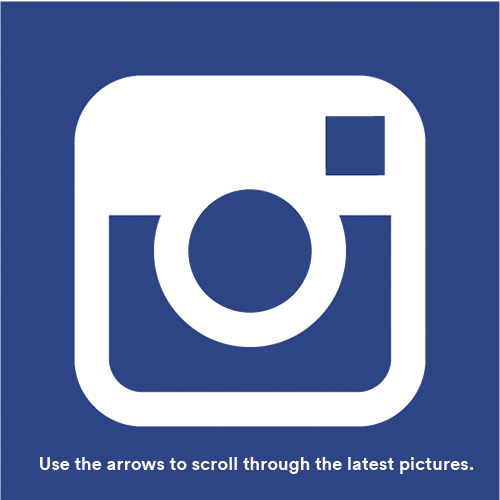
<style>
.page{position:relative;width:500px;height:500px;background:#ffffff}
.page>*{position:absolute;margin:0}
.t1{font:18px "Circular-Bold";letter-spacing:0.01em;color:#fcf8f8}
</style>
<div class="page">
<p class="t1" style="left:40px;top:457px;width:434px;height:17px">Use the arrows to scroll through the latest pictures.</p>
</div>
